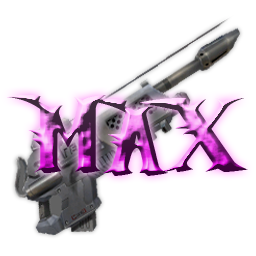
<style>
.page{position:relative;width:256px;height:256px;background:#ffffff}
.page>*{position:absolute;margin:0}
.t1{font:97.4px "UnrealTournament";scale:0.87 1}
</style>
<div class="page">
<p class="t1" style="left:7px;top:95px;width:241px;height:81px">MAX</p>
</div>
